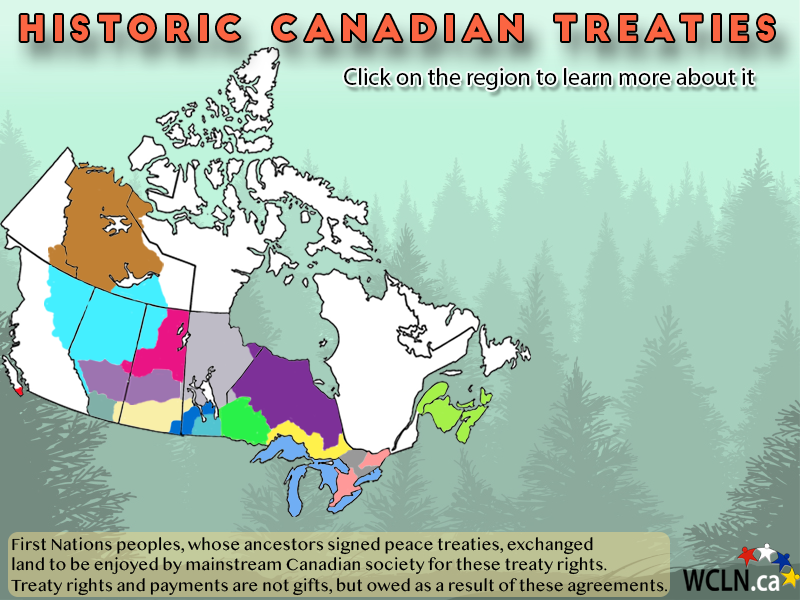
<style>
.page{position:relative;width:800px;height:600px}
.page>*{position:absolute;margin:0}
.t1{font:35px "BigJohn";letter-spacing:0.18em;color:#fb6542}
.t2{font:24px "MyriadPro-Regular";letter-spacing:0.001em;color:#000000}
.t3{font:17px "MalayalamMN";letter-spacing:0.001em;color:#000000}
</style>
<div class="page">
<p class="t1" style="left:20px;top:14px;width:754px;height:28px">Historic Canadian Treaties</p>
<p class="t2" style="left:344px;top:68px;width:410px;height:22px">Click on the region to learn more about it</p>
<p class="t3" style="left:11px;top:537px;width:656px;height:59px">First Nations peoples, whose ancestors signed peace treaties, exchanged <br>land to be enjoyed by mainstream Canadian society for these treaty rights. <br>Treaty rights and payments are not gifts, but owed as a result of these agreements.</p>
</div>
